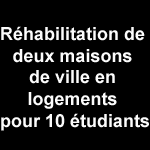
<style>
.page{position:relative;width:150px;height:150px;background:#000000}
.page>*{position:absolute;margin:0}
.t1{font:18px "Arial-BoldMT";color:#fcfcfc}
</style>
<div class="page">
<p class="t1" style="left:1px;top:26px;width:148px;height:105px;text-align:center">Réhabilitation de <br>deux maisons <br>de ville en <br>logements <br>pour 10 étudiants</p>
</div>
